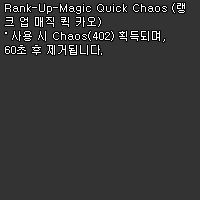
<style>
.page{position:relative;width:200px;height:200px;background:#333333}
.page>*{position:absolute;margin:0}
.t1{font:11px/14px "Dotum";color:#ffffff}
</style>
<div class="page">
<p class="t1" style="left:5px;top:3px;width:180px;height:52px">Rank-Up-Magic Quick Chaos (랭<br>크 업 매직 퀵 카오)<br>˚ 사용 시 Chaos(402) 획득되며, <br>60초 후 제거됩니다.</p>
</div>
